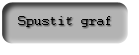
<style>
.page{position:relative;width:139px;height:55px;background:#ffffff}
.page>*{position:absolute;margin:0}
.t1{font:14px "Courier";color:#000000}
</style>
<div class="page">
<p class="t1" style="left:18px;top:16px;width:92px;height:11px">Spustiť graf</p>
</div>
